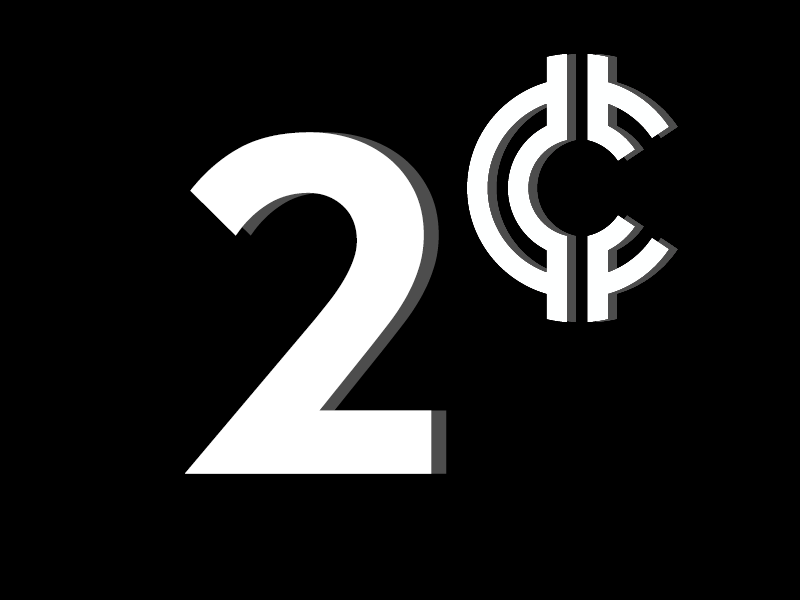
<style>
.page{position:relative;width:800px;height:600px;background:#000000}
.page>*{position:absolute;margin:0}
.t1{font:418.5px "KeepCalm-Medium";letter-spacing:-0.03em;color:#ffffff}
</style>
<div class="page">
<p class="t1" style="left:185px;top:132px;width:247px;height:342px">2</p>
</div>
